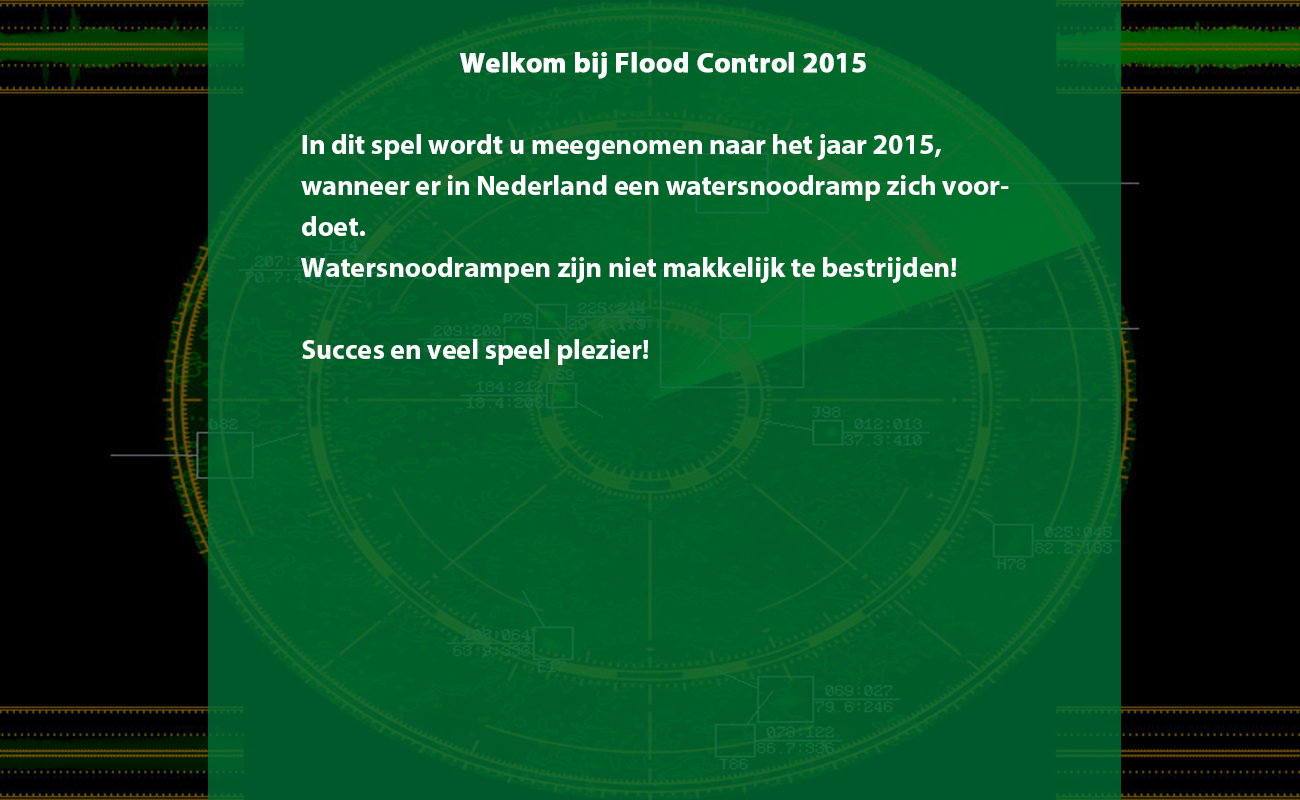
<style>
.page{position:relative;width:1300px;height:800px;background:#000000}
.page>*{position:absolute;margin:0}
.t1{font:28px/41px "MyriadPro-Bold";color:#ffffff}
.t2{font:28px "MyriadPro-Bold";color:#ffffff;font-weight:bold}
</style>
<div class="page">
<p class="t1" style="left:301px;top:52px;width:708px;height:313px;text-align:center"><span class="t2">Welkom bij Flood Control 2015<br></span><br>In dit spel wordt u meegenomen naar het jaar 2015, <br>wanneer er in Nederland een watersnoodramp zich voordoet.<br>Watersnoodrampen zijn niet makkelijk te bestrijden! <br><br>Succes en veel speel plezier!</p>
</div>
